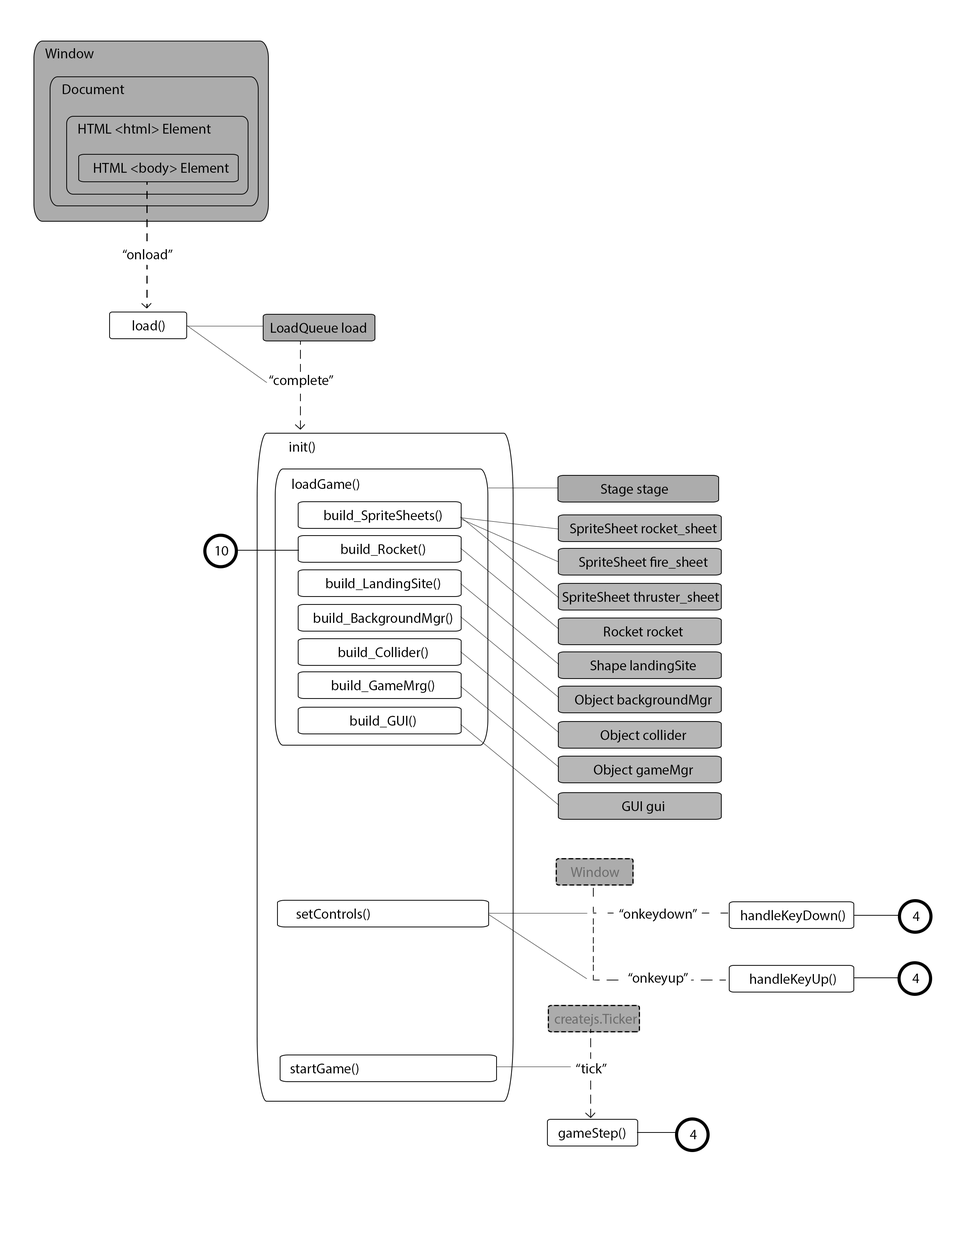
<style>
.page{position:relative;width:960px;height:1242px;background:#ffffff}
.page>*{position:absolute;margin:0}
.t1{font:14.1px "MyriadPro-Regular";color:#000000}
.t2{font:14.1px "MyriadPro-Regular";color:#6c6c6c}
</style>
<div class="page">
<p class="t1" style="left:45px;top:48px;width:49px;height:10px">Window</p>
<p class="t1" style="left:62px;top:84px;width:62px;height:10px">Document</p>
<p class="t1" style="left:78px;top:123px;width:133px;height:11px">HTML &lt;html&gt; Element</p>
<p class="t1" style="left:94px;top:163px;width:135px;height:13px">HTML &lt;body&gt; Element</p>
<p class="t1" style="left:123px;top:249px;width:50px;height:10px">“onload”</p>
<p class="t1" style="left:133px;top:320px;width:32px;height:12px">load()</p>
<p class="t1" style="left:271px;top:323px;width:95px;height:11px">LoadQueue load</p>
<p class="t1" style="left:269px;top:375px;width:65px;height:13px">“complete”</p>
<p class="t1" style="left:289px;top:442px;width:26px;height:11px">init()</p>
<p class="t1" style="left:292px;top:479px;width:67px;height:11px">loadGame()</p>
<p class="t1" style="left:601px;top:484px;width:67px;height:13px">Stage stage</p>
<p class="t1" style="left:324px;top:510px;width:118px;height:13px">build_SpriteSheets()</p>
<p class="t1" style="left:570px;top:523px;width:147px;height:13px">SpriteSheet rocket_sheet</p>
<p class="t1" style="left:341px;top:544px;width:84px;height:12px">build_Rocket()</p>
<p class="t1" style="left:215px;top:546px;width:13px;height:10px">10</p>
<p class="t1" style="left:579px;top:557px;width:129px;height:13px">SpriteSheet fire_sheet</p>
<p class="t1" style="left:326px;top:578px;width:114px;height:13px">build_LandingSite()</p>
<p class="t1" style="left:562px;top:592px;width:157px;height:13px">SpriteSheet thruster_sheet</p>
<p class="t1" style="left:314px;top:613px;width:138px;height:13px">build_BackgroundMgr()</p>
<p class="t1" style="left:604px;top:626px;width:79px;height:11px">Rocket rocket</p>
<p class="t1" style="left:338px;top:647px;width:90px;height:12px">build_Collider()</p>
<p class="t1" style="left:590px;top:660px;width:106px;height:13px">Shape landingSite</p>
<p class="t1" style="left:332px;top:680px;width:102px;height:13px">build_GameMrg()</p>
<p class="t1" style="left:575px;top:695px;width:137px;height:12px">Object backgroundMgr</p>
<p class="t1" style="left:350px;top:716px;width:66px;height:12px">build_GUI()</p>
<p class="t1" style="left:600px;top:730px;width:86px;height:13px">Object collider</p>
<p class="t1" style="left:594px;top:765px;width:99px;height:12px">Object gameMgr</p>
<p class="t1" style="left:622px;top:801px;width:42px;height:13px">GUI gui</p>
<p class="t2" style="left:571px;top:867px;width:48px;height:10px">Window</p>
<p class="t1" style="left:296px;top:909px;width:74px;height:11px">setControls()</p>
<p class="t1" style="left:619px;top:909px;width:78px;height:13px">“onkeydown”</p>
<p class="t1" style="left:741px;top:910px;width:104px;height:13px">handleKeyDown()</p>
<p class="t1" style="left:912px;top:912px;width:8px;height:9px">4</p>
<p class="t1" style="left:628px;top:973px;width:60px;height:13px">“onkeyup”</p>
<p class="t1" style="left:750px;top:974px;width:86px;height:13px">handleKeyUp()</p>
<p class="t1" style="left:912px;top:974px;width:7px;height:9px">4</p>
<p class="t2" style="left:554px;top:1014px;width:83px;height:13px">createjs.Ticker</p>
<p class="t1" style="left:290px;top:1063px;width:68px;height:12px">startGame()</p>
<p class="t1" style="left:576px;top:1063px;width:31px;height:11px">“tick”</p>
<p class="t1" style="left:558px;top:1128px;width:67px;height:13px">gameStep()</p>
<p class="t1" style="left:690px;top:1130px;width:7px;height:9px">4</p>
</div>
